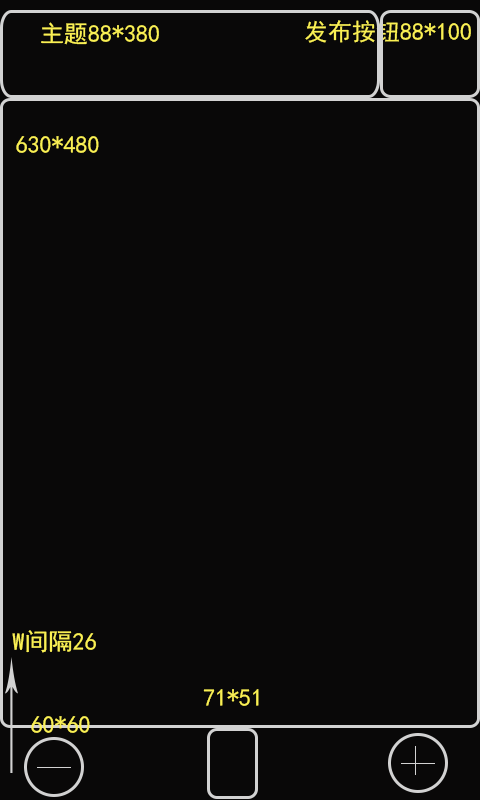
<style>
.page{position:relative;width:480px;height:800px;background:#090808}
.page>*{position:absolute;margin:0}
.t1{font:24px "SimHei";color:#faf054}
</style>
<div class="page">
<p class="t1" style="left:41px;top:22px;width:118px;height:23px">主题88*380</p>
<p class="t1" style="left:305px;top:20px;width:166px;height:23px">发布按钮88*100</p>
<p class="t1" style="left:16px;top:136px;width:83px;height:17px">630*480</p>
<p class="t1" style="left:12px;top:630px;width:84px;height:23px">W间隔26</p>
<p class="t1" style="left:203px;top:689px;width:56px;height:17px">71*51</p>
<p class="t1" style="left:31px;top:716px;width:59px;height:17px">60*60</p>
</div>
